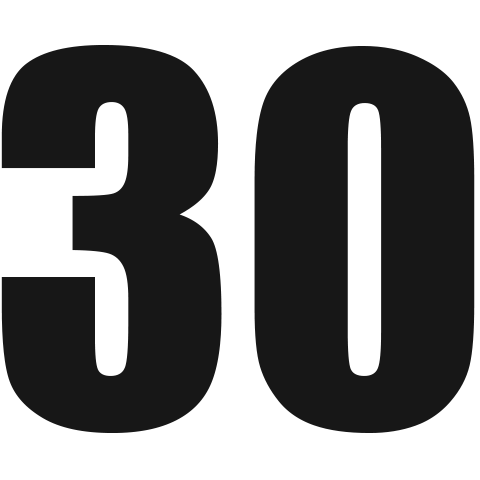
<style>
.page{position:relative;width:480px;height:480px;background:#171717}
.page>*{position:absolute;margin:0}
.t1{font:472.3px "Impact";color:#171717}
</style>
<div class="page">
<p class="t1" style="left:1px;top:45px;width:474px;height:388px">30</p>
</div>
